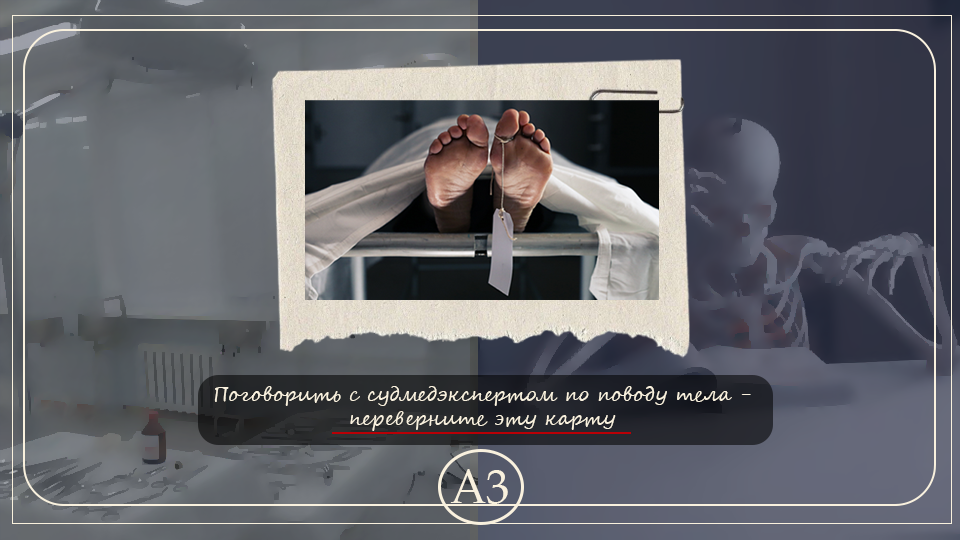
<style>
.page{position:relative;width:960px;height:540px}
.page>*{position:absolute;margin:0}
.t1{font:19.7px "SegoeScript";color:#f9f1de}
.t2{font:46.6px "BookAntiqua";color:#f9f1de}
</style>
<div class="page">
<p class="t1" style="left:214px;top:386px;width:537px;height:45px;text-align:center">Поговорить с судмедэкспертом по поводу тела - переверните эту карту</p>
<p class="t2" style="left:450px;top:469px;width:58px;height:35px">A3</p>
</div>
